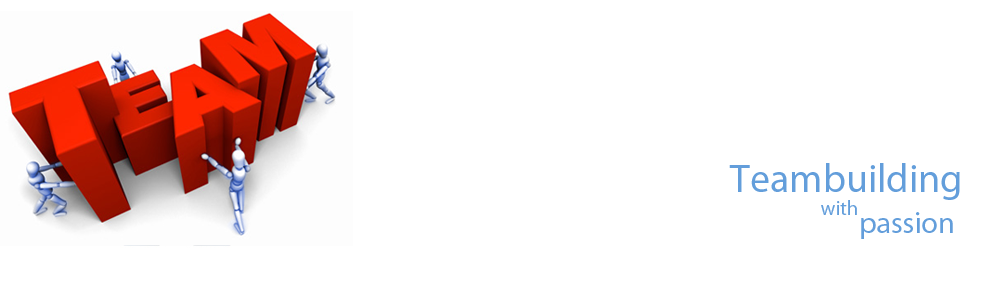
<style>
.page{position:relative;width:1008px;height:292px;background:#ffffff}
.page>*{position:absolute;margin:0}
.t1{font:40px "MyriadPro-Regular";color:#639edb}
.t2{font:20px "MyriadPro-Regular";color:#639edb}
.t3{font:30px "MyriadPro-Regular";color:#639edb}
</style>
<div class="page">
<p class="t1" style="left:729px;top:163px;width:231px;height:37px">Teambuilding</p>
<p class="t2" style="left:821px;top:200px;width:36px;height:15px">with</p>
<p class="t3" style="left:861px;top:212px;width:92px;height:27px">passion</p>
</div>
